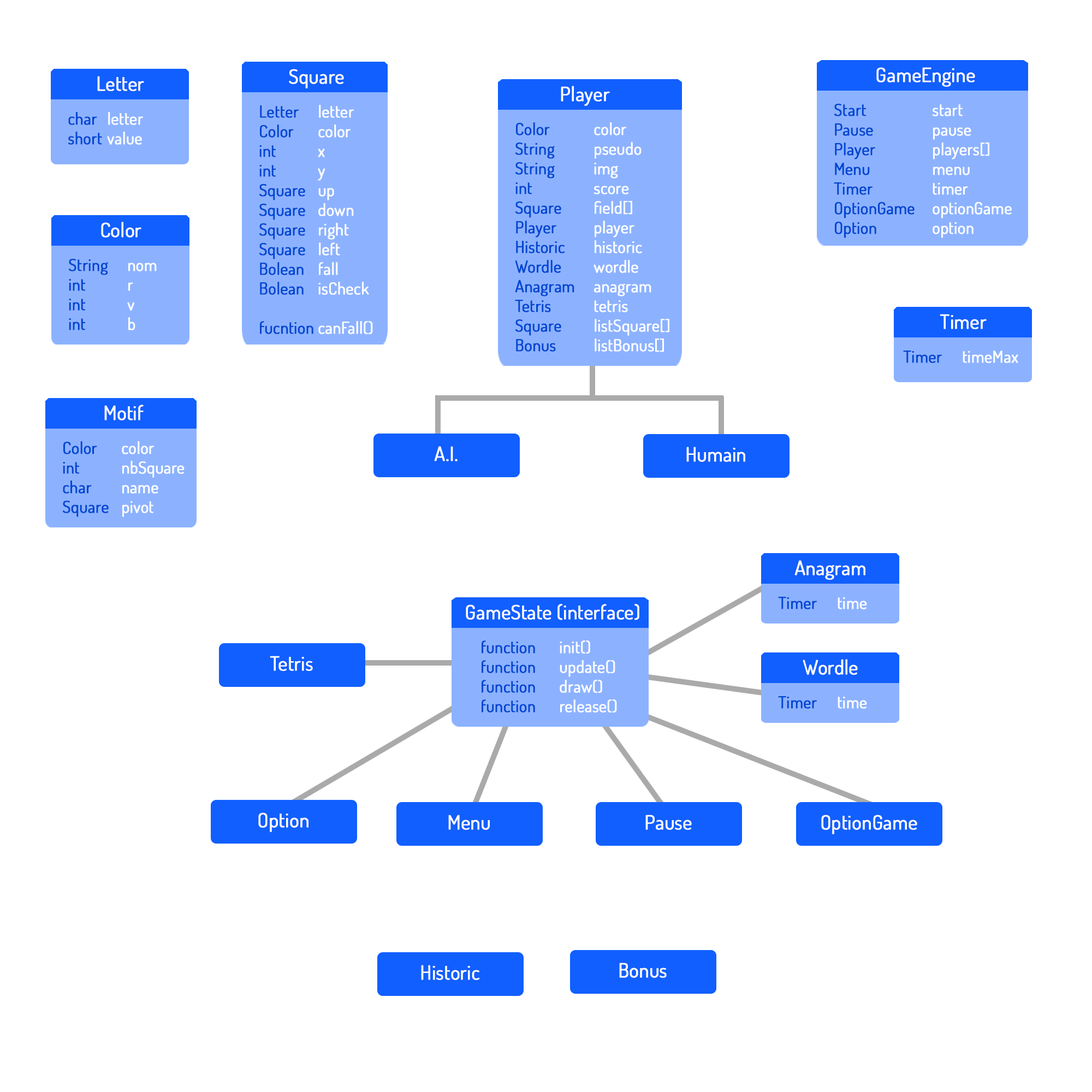
<style>
.page{position:relative;width:1092px;height:1092px;background:#ffffff}
.page>*{position:absolute;margin:0}
.t1{font:19.7px "Dosis-Regular";color:#ffffff;font-weight:bold}
.t2{font:16.4px "Dosis-Regular";color:#ffffff;font-weight:bold}
.t3{font:16.4px "Dosis-Regular";color:#0045d2;font-weight:bold}
</style>
<div class="page">
<p class="t1" style="left:97px;top:76px;width:47px;height:15px">Letter</p>
<p class="t1" style="left:289px;top:69px;width:55px;height:19px">Square</p>
<p class="t1" style="left:876px;top:67px;width:99px;height:20px">GameEngine</p>
<p class="t1" style="left:561px;top:86px;width:49px;height:20px">Player</p>
<p class="t2" style="left:68px;top:112px;width:75px;height:33px"><span class="t3">char </span> letter<br><span class="t3">short </span>value</p>
<p class="t2" style="left:259px;top:105px;width:114px;height:229px"><span class="t3">Letter </span> letter<br><span class="t3">Color  </span>color<br><span class="t3">int   </span>x<br><span class="t3">int   </span>y<br><span class="t3">Square </span>up<br><span class="t3">Square </span>down<br><span class="t3">Square </span>right<br><span class="t3">Square </span>left<br><span class="t3">Bolean</span> fall<br><span class="t3">Bolean</span> isCheck<br><br><span class="t3">fucntion</span> canFall()</p>
<p class="t3" style="left:834px;top:104px;width:178px;height:134px">Start    <span class="t2">start<br></span>Pause<span class="t2">   pause<br></span>Player<span class="t2">   players[]<br></span>Menu <span class="t2">   menu<br></span>Timer <span class="t2">   timer<br></span>OptionGame<span class="t2"> optionGame<br></span>Option <span class="t2">  option</span></p>
<p class="t2" style="left:515px;top:122px;width:154px;height:230px"><span class="t3">Color </span>   color<br><span class="t3">String  </span>pseudo<br><span class="t3">String  </span>img<br><span class="t3">int    </span>score<br><span class="t3">Square </span>  field[]<br><span class="t3">Player  </span>player<br><span class="t3">Historic  </span>historic<br><span class="t3">Wordle  </span>wordle<br><span class="t3">Anagram </span>anagram<br><span class="t3">Tetris   </span>tetris<br><span class="t3">Square  </span>listSquare[]<br><span class="t3">Bonus </span> listBonus[]</p>
<p class="t1" style="left:101px;top:222px;width:40px;height:16px">Color</p>
<p class="t3" style="left:69px;top:259px;width:88px;height:71px">String <span class="t2"> nom<br></span>int   <span class="t2">r<br></span>int   <span class="t2">v<br></span>int   <span class="t2">b</span></p>
<p class="t1" style="left:940px;top:314px;width:47px;height:15px">Timer</p>
<p class="t2" style="left:903px;top:351px;width:115px;height:12px"><span class="t3">Timer </span> timeMax</p>
<p class="t1" style="left:104px;top:405px;width:40px;height:15px">Motif</p>
<p class="t2" style="left:63px;top:441px;width:122px;height:76px"><span class="t3">Color </span>  color<br><span class="t3">int   </span>nbSquare<br><span class="t3">char  </span>name<br><span class="t3">Square </span>pivot</p>
<p class="t1" style="left:434px;top:446px;width:24px;height:15px">A.I.</p>
<p class="t1" style="left:686px;top:447px;width:59px;height:15px">Humain</p>
<p class="t1" style="left:794px;top:560px;width:71px;height:20px">Anagram</p>
<p class="t1" style="left:466px;top:604px;width:173px;height:16px">GameState (interface)</p>
<p class="t3" style="left:778px;top:597px;width:89px;height:12px">Timer <span class="t2"> time</span></p>
<p class="t2" style="left:482px;top:640px;width:135px;height:73px"><span class="t3">function </span> init()<br><span class="t3">function  </span>update()<br><span class="t3">function  </span>draw()<br><span class="t3">function  </span>release()</p>
<p class="t1" style="left:270px;top:656px;width:43px;height:15px">Tetris</p>
<p class="t1" style="left:803px;top:659px;width:55px;height:16px">Wordle</p>
<p class="t3" style="left:778px;top:696px;width:89px;height:13px">Timer <span class="t2"> time</span></p>
<p class="t1" style="left:258px;top:812px;width:50px;height:20px">Option</p>
<p class="t1" style="left:448px;top:815px;width:42px;height:15px">Menu</p>
<p class="t1" style="left:645px;top:815px;width:47px;height:15px">Pause</p>
<p class="t1" style="left:821px;top:815px;width:96px;height:19px">OptionGame</p>
<p class="t1" style="left:421px;top:965px;width:59px;height:15px">Historic</p>
<p class="t1" style="left:619px;top:963px;width:48px;height:15px">Bonus</p>
</div>
